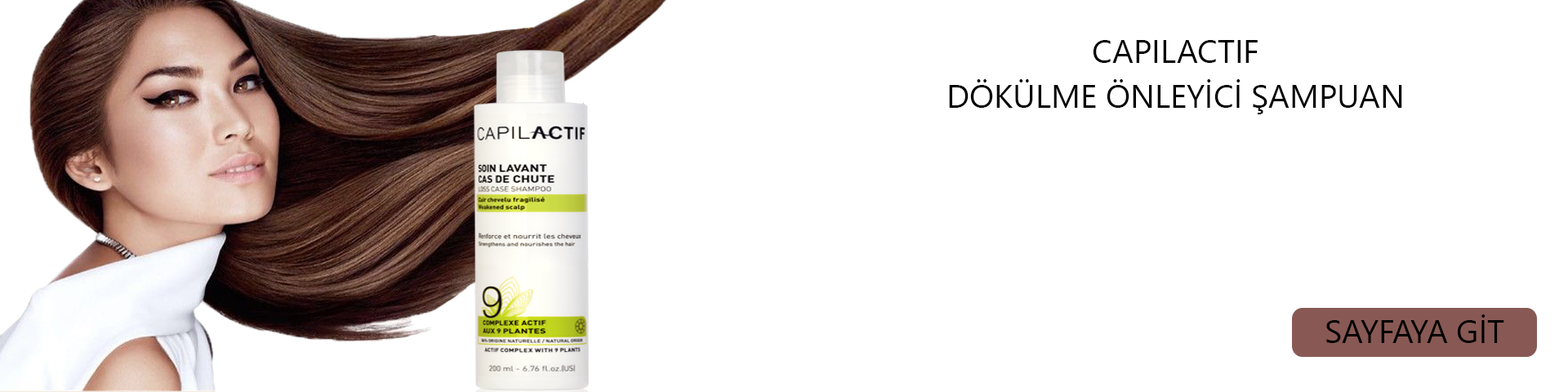
<style>
.page{position:relative;width:1568px;height:392px;background:#ffffff}
.page>*{position:absolute;margin:0}
.t1{font:32.7px "SegoeUI";color:#000000}
</style>
<div class="page">
<p class="t1" style="left:1093px;top:40px;width:165px;height:23px">CAPILACTIF</p>
<p class="t1" style="left:949px;top:79px;width:453px;height:35px">DÖKÜLME ÖNLEYİCİ ŞAMPUAN</p>
<p class="t1" style="left:1326px;top:314px;width:178px;height:29px">SAYFAYA GİT</p>
</div>
